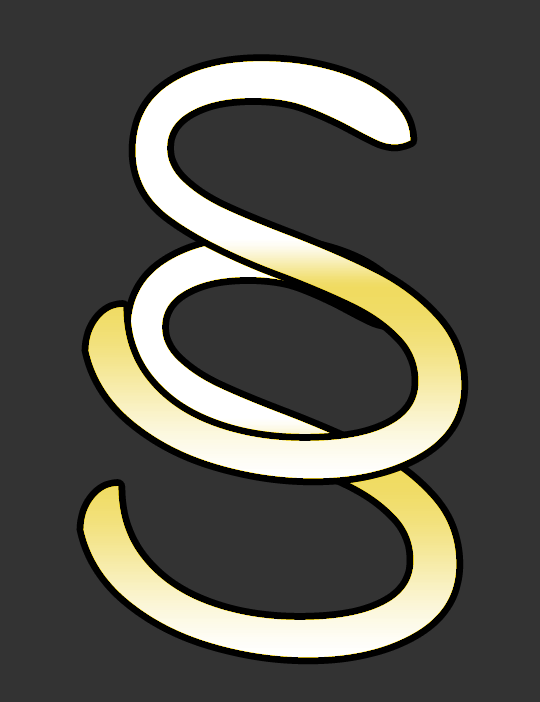
<style>
.page{position:relative;width:540px;height:702px;background:#333333}
.page>*{position:absolute;margin:0}
.t1{font:662.6px "IndieFlower-Regular"}
</style>
<div class="page">
<p class="t1" style="left:88px;top:61px;width:374px;height:418px">S</p>
<p class="t1" style="left:83px;top:240px;width:374px;height:418px">S</p>
</div>
